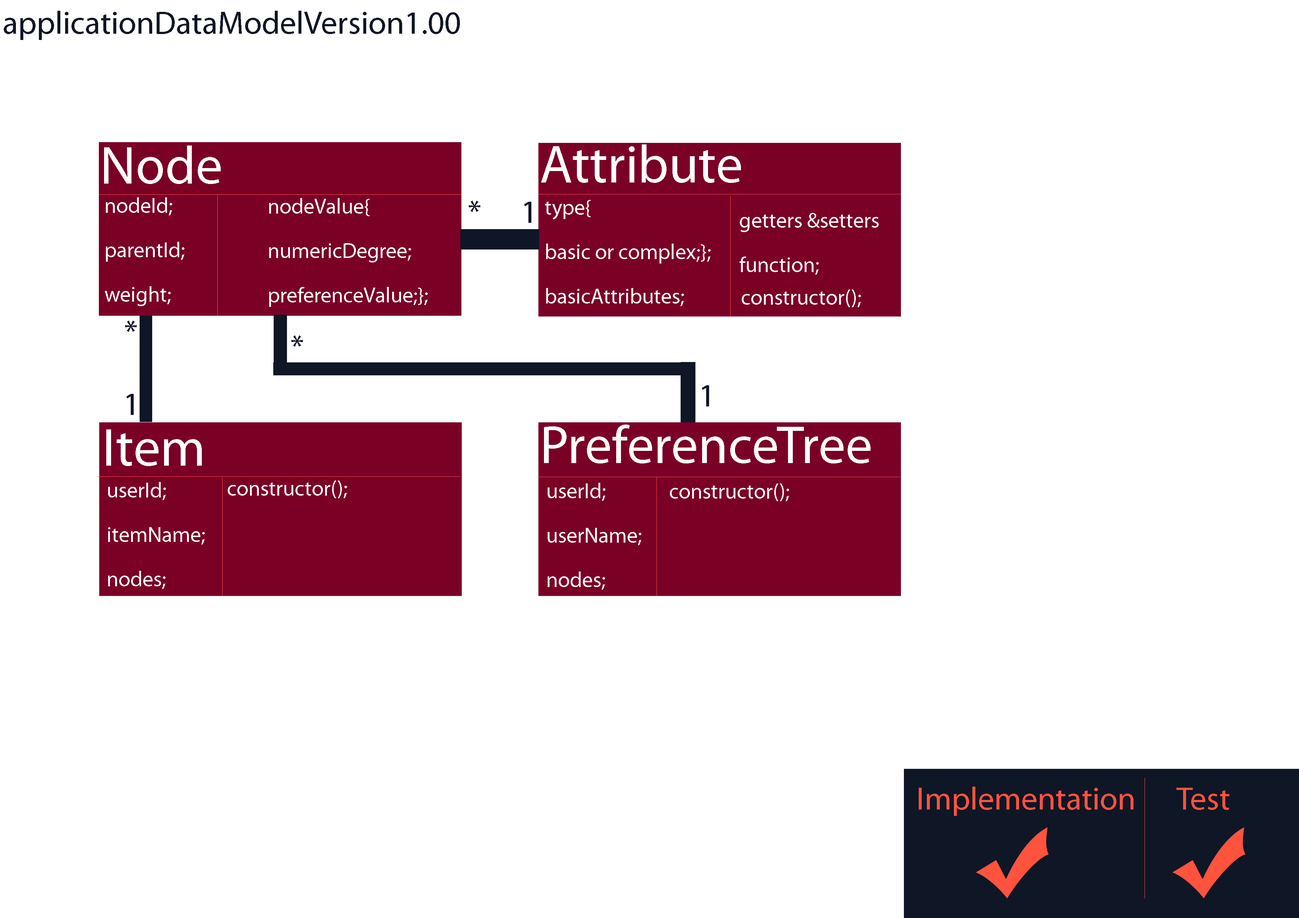
<style>
.page{position:relative;width:1299px;height:918px;background:#ffffff}
.page>*{position:absolute;margin:0}
.t1{font:55.5px "MyriadPro-Regular";color:#0f1626}
.t2{font:92.6px "MyriadPro-Regular";color:#ffffff}
.t3{font:37px "MyriadPro-Regular";color:#ffffff}
.t4{font:55.5px "MyriadPro-Regular";color:#ff533d}
</style>
<div class="page">
<p class="t1" style="left:4px;top:11px;width:456px;height:29px">applicationDataModelVersion1.00</p>
<p class="t2" style="left:104px;top:145px;width:117px;height:39px">Node</p>
<p class="t2" style="left:541px;top:144px;width:200px;height:39px">Attribute</p>
<p class="t3" style="left:105px;top:197px;width:79px;height:109px">nodeId;<br>parentId;<br>weight;</p>
<p class="t3" style="left:269px;top:198px;width:159px;height:109px">nodeValue{<br>numericDegree;<br>preferenceValue;};</p>
<p class="t1" style="left:469px;top:201px;width:62px;height:22px">*   1</p>
<p class="t3" style="left:545px;top:200px;width:165px;height:106px">type{<br>basic or complex;};<br>basicAttributes;</p>
<p class="t3" style="left:739px;top:213px;width:140px;height:62px">getters &amp;setters <br>function;</p>
<p class="t3" style="left:742px;top:290px;width:119px;height:17px">constructor();</p>
<p class="t1" style="left:125px;top:321px;width:12px;height:11px">*</p>
<p class="t1" style="left:291px;top:335px;width:12px;height:12px">*</p>
<p class="t1" style="left:702px;top:385px;width:7px;height:22px">1</p>
<p class="t1" style="left:127px;top:394px;width:7px;height:21px">1</p>
<p class="t2" style="left:544px;top:425px;width:326px;height:39px">PreferenceTree</p>
<p class="t2" style="left:106px;top:429px;width:96px;height:37px">Item</p>
<p class="t3" style="left:108px;top:482px;width:97px;height:107px">userId;<br>itemName;<br>nodes;</p>
<p class="t3" style="left:228px;top:481px;width:119px;height:17px">constructor();</p>
<p class="t3" style="left:548px;top:483px;width:93px;height:107px">userId;<br>userName;<br>nodes;</p>
<p class="t3" style="left:670px;top:484px;width:119px;height:17px">constructor();</p>
<p class="t4" style="left:919px;top:787px;width:310px;height:29px">Implementation     Test</p>
</div>
